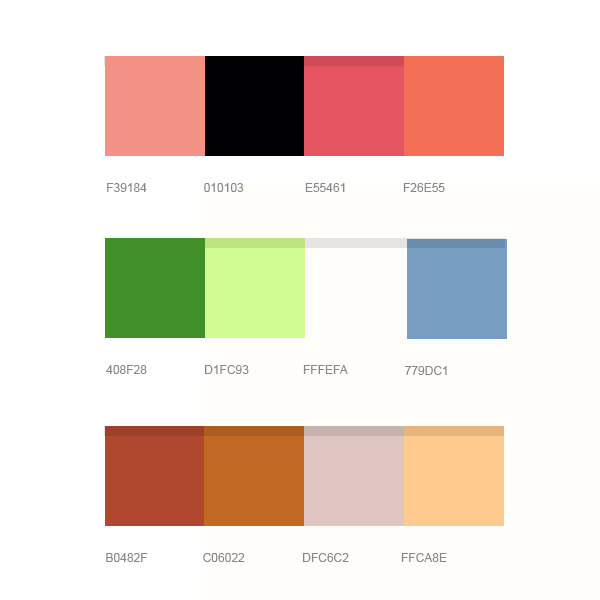
<style>
.page{position:relative;width:600px;height:600px;background:#ffffff}
.page>*{position:absolute;margin:0}
.t1{font:12px "ArialMT";color:#878787;text-transform:uppercase}
</style>
<div class="page">
<p class="t1" style="left:107px;top:183px;width:40px;height:9px">f39184</p>
<p class="t1" style="left:204px;top:183px;width:40px;height:9px">010103</p>
<p class="t1" style="left:305px;top:183px;width:40px;height:9px">e55461</p>
<p class="t1" style="left:403px;top:183px;width:42px;height:9px">f26e55</p>
<p class="t1" style="left:106px;top:365px;width:41px;height:9px">408f28</p>
<p class="t1" style="left:205px;top:365px;width:44px;height:9px">d1fc93</p>
<p class="t1" style="left:303px;top:365px;width:45px;height:9px">fffefa</p>
<p class="t1" style="left:405px;top:366px;width:42px;height:9px">779dc1</p>
<p class="t1" style="left:106px;top:553px;width:42px;height:9px">B0482F</p>
<p class="t1" style="left:203px;top:553px;width:42px;height:9px">C06022</p>
<p class="t1" style="left:303px;top:553px;width:46px;height:9px">dfc6c2</p>
<p class="t1" style="left:401px;top:553px;width:46px;height:9px">ffca8E</p>
</div>
